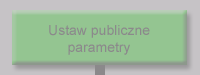
<style>
.page{position:relative;width:200px;height:75px;background:#94c591}
.page>*{position:absolute;margin:0}
.t1{font:14px "ArialMT";color:#8b898b}
</style>
<div class="page">
<p class="t1" style="left:49px;top:25px;width:101px;height:30px;text-align:center">Ustaw publiczne<br>parametry</p>
</div>
